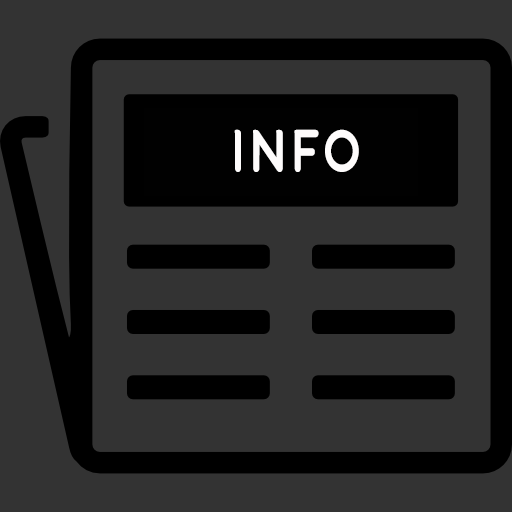
<style>
.page{position:relative;width:512px;height:512px;background:#333333}
.page>*{position:absolute;margin:0}
.t1{font:65.8px "BubbleboddyNeueTrial-Regular";letter-spacing:0.1em;color:#fefcfc;scale:0.8 1}
</style>
<div class="page">
<p class="t1" style="left:234px;top:129px;width:125px;height:43px">INFO</p>
</div>
